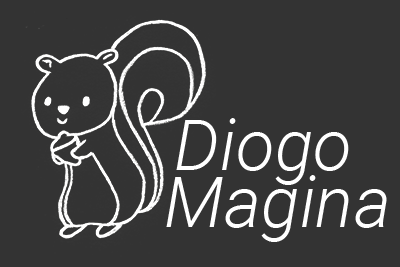
<style>
.page{position:relative;width:400px;height:267px;background:#333333}
.page>*{position:absolute;margin:0}
.t1{font:71.2px "Roboto-LightItalic";color:#ffffff}
</style>
<div class="page">
<p class="t1" style="left:176px;top:118px;width:173px;height:67px">Diogo</p>
<p class="t1" style="left:166px;top:175px;width:221px;height:67px">Magina</p>
</div>
